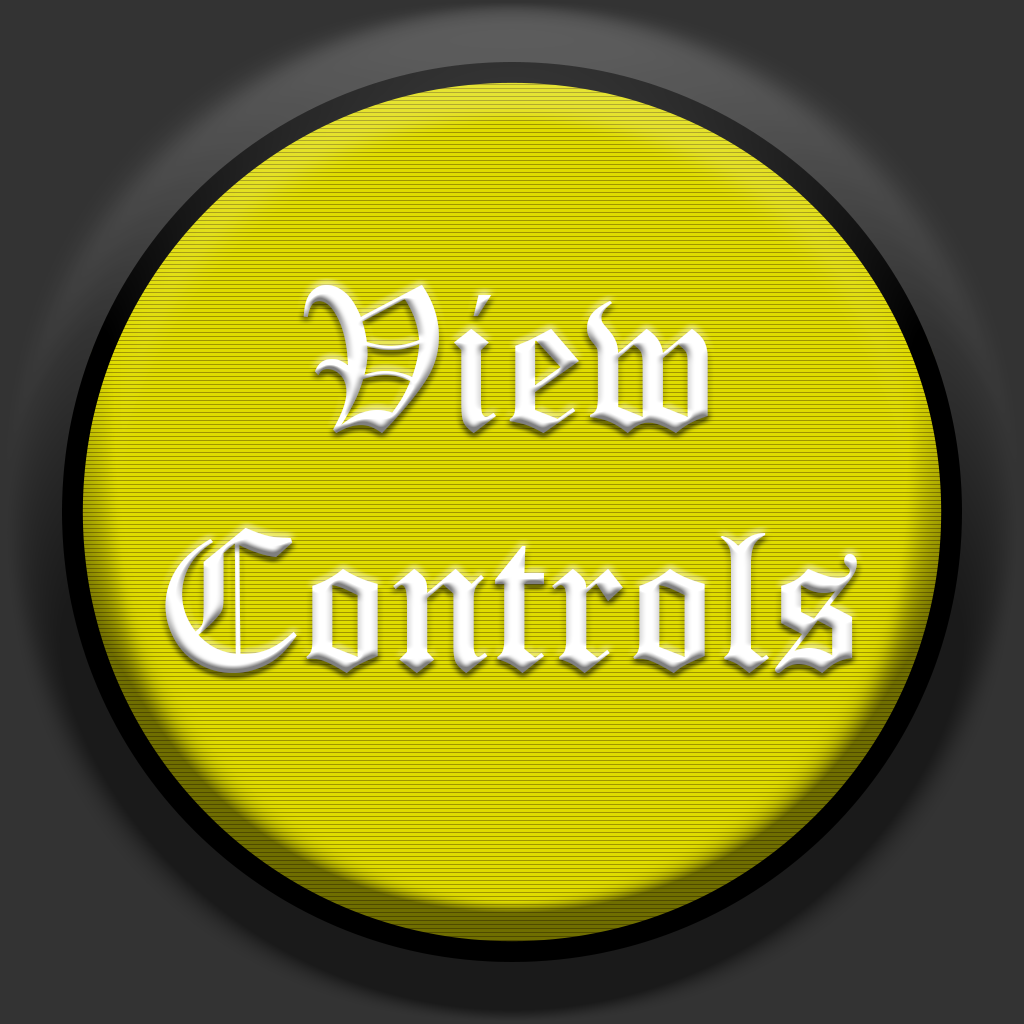
<style>
.page{position:relative;width:1024px;height:1024px;background:#9f9400}
.page>*{position:absolute;margin:0}
.t1{font:200px "OldEnglishTextMT";color:#ffffff}
</style>
<div class="page">
<p class="t1" style="left:165px;top:285px;width:692px;height:388px;text-align:center">View<br>Controls</p>
</div>
